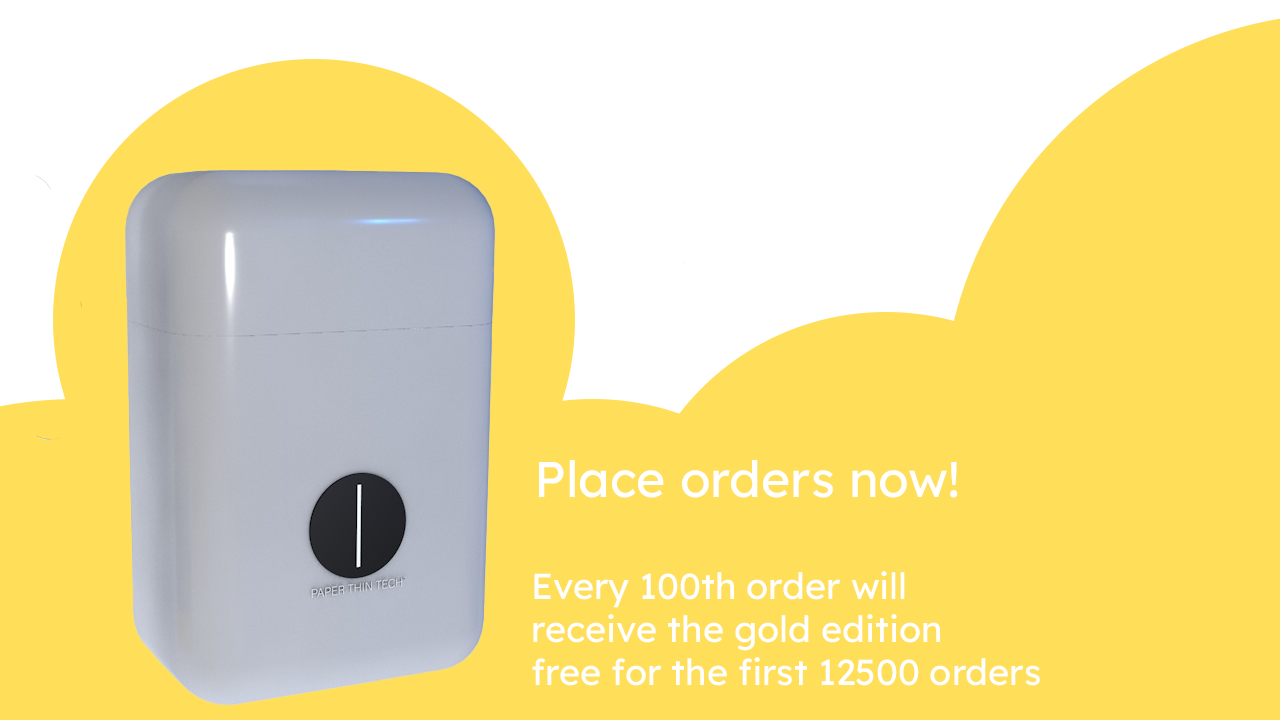
<style>
.page{position:relative;width:1280px;height:720px;background:#ffde59}
.page>*{position:absolute;margin:0}
.t1{font:50px "Lexend-Regular";color:#ffffff}
.t2{font:36px "Lexend-Regular";color:#ffffff}
</style>
<div class="page">
<p class="t1" style="left:539px;top:460px;width:419px;height:38px">Place orders now!</p>
<p class="t2" style="left:532px;top:571px;width:508px;height:115px">Every 100th order will <br>receive the gold edition <br>free for the first 12500 orders</p>
</div>
